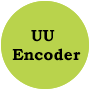
<style>
.page{position:relative;width:90px;height:90px;background:#b9d34c}
.page>*{position:absolute;margin:0}
.t1{font:16px "BookmanOldStyle-Bold";color:#000000}
</style>
<div class="page">
<p class="t1" style="left:31px;top:30px;width:24px;height:12px">UU</p>
<p class="t1" style="left:12px;top:48px;width:69px;height:13px">Encoder</p>
</div>
